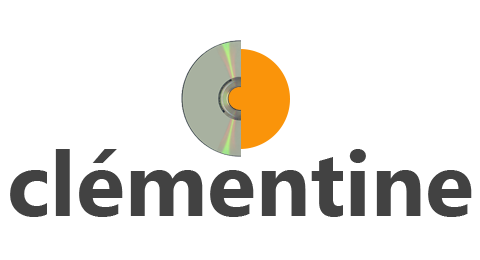
<style>
.page{position:relative;width:480px;height:260px;background:#ffffff}
.page>*{position:absolute;margin:0}
.t1{font:90px "LeelawadeeUI-Bold";color:#424242}
</style>
<div class="page">
<p class="t1" style="left:10px;top:149px;width:462px;height:68px">clémentine</p>
</div>
